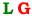
<style>
.page{position:relative;width:32px;height:16px;background:#ffffff}
.page>*{position:absolute;margin:0}
.t1{font:17.1px "BookmanOldStyle-Bold";color:#008000}
.t2{font:17.1px "BookmanOldStyle-Bold";color:#ff0000}
</style>
<div class="page">
<p class="t1" style="left:3px;top:2px;width:11px;height:12px">L</p>
<p class="t2" style="left:18px;top:2px;width:13px;height:13px">G</p>
</div>
